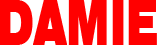
<style>
.page{position:relative;width:157px;height:45px;background:#ff0000}
.page>*{position:absolute;margin:0}
.t1{font:61.1px "Swiss721BT-BlackExtended";color:#ff0000;font-weight:bold;scale:0.56 1}
</style>
<div class="page">
<p class="t1" style="left:0px;top:0px;width:157px;height:45px">DAMIE</p>
</div>
